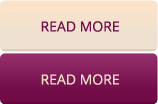
<style>
.page{position:relative;width:158px;height:104px}
.page>*{position:absolute;margin:0}
.t1{font:14px "OpenSans";color:#6f0b46;text-transform:uppercase}
.t2{font:14px "OpenSans";color:#f9e3ca;text-transform:uppercase}
</style>
<div class="page">
<p class="t1" style="left:41px;top:21px;width:78px;height:11px">read more</p>
<p class="t2" style="left:41px;top:74px;width:78px;height:11px">read more</p>
</div>
